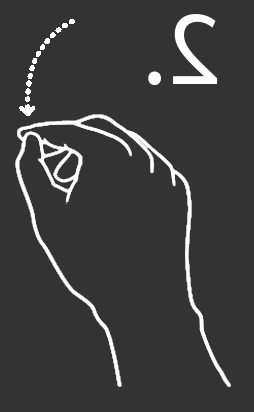
<style>
.page{position:relative;width:254px;height:412px;background:#333333}
.page>*{position:absolute;margin:0}
.t1{font:106.8px "MyriadPro-Regular";color:#ffffff}
</style>
<div class="page">
<p class="t1" style="left:148px;top:14px;width:70px;height:71px;rotate:180deg">2.</p>
</div>
